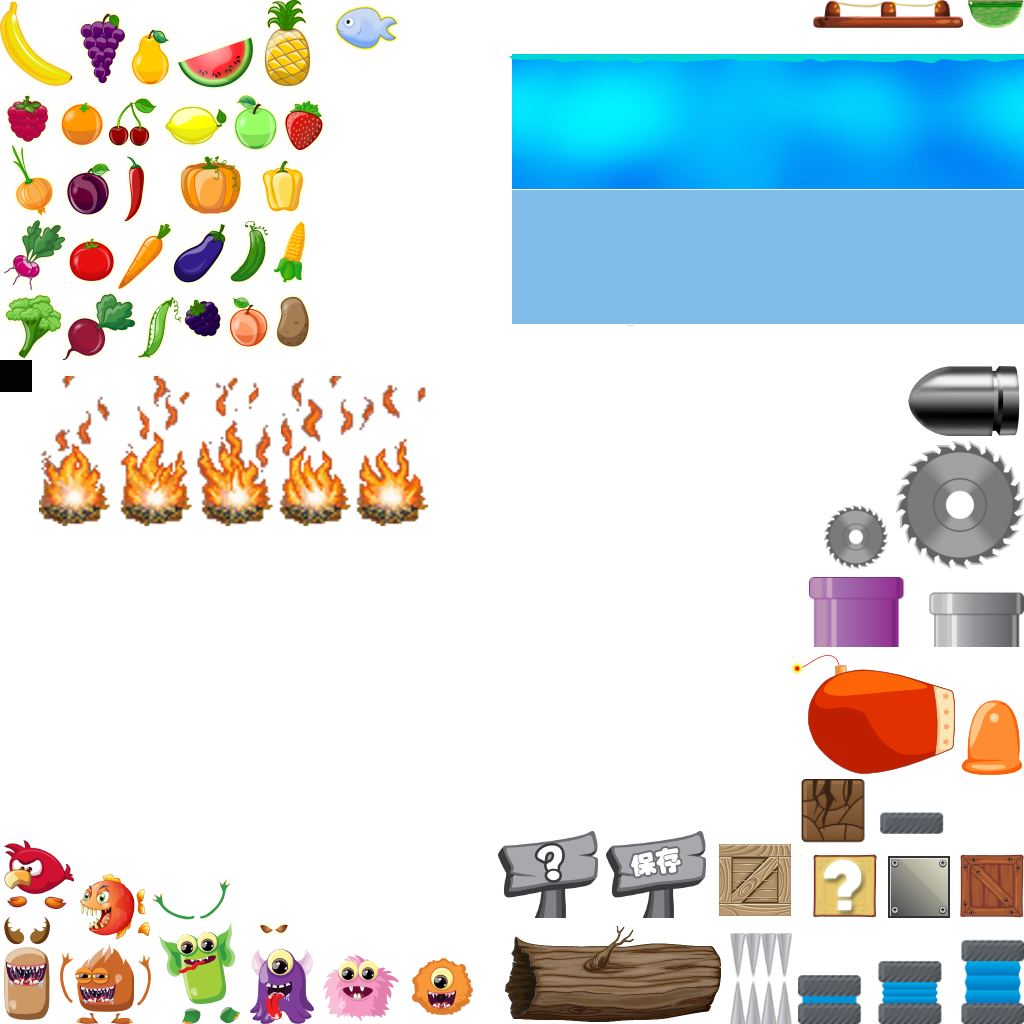
<style>
.page{position:relative;width:1024px;height:1024px;background:#ffffff}
.page>*{position:absolute;margin:0}
.t1{font:25px "STHupo";color:#ffffff}
</style>
<div class="page">
<p class="t1" style="left:631px;top:848px;width:50px;height:29px;rotate:-9deg">保存</p>
</div>
